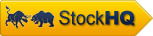
<style>
.page{position:relative;width:153px;height:36px}
.page>*{position:absolute;margin:0}
.t1{font:19px "ArialMT";color:#122850;scale:0.97 1}
.t2{font:19px "Arial-Black";color:#142c55;text-transform:uppercase;scale:0.97 1}
.t3{font:19px "ArialMT";color:#142c55;scale:0.97 1}
</style>
<div class="page">
<p class="t1" style="left:59px;top:10px;width:46px;height:15px">Stock</p>
<p class="t2" style="left:105px;top:10px;width:30px;height:16px"><span class="t3"> </span>HQ</p>
</div>
